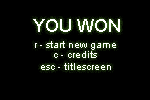
<style>
.page{position:relative;width:150px;height:100px;background:#000000}
.page>*{position:absolute;margin:0}
.t1{font:18px "ArialMT";color:#ffffff}
.t2{font:10px "ArialMT";color:#ffffff}
</style>
<div class="page">
<p class="t1" style="left:33px;top:19px;width:87px;height:13px">YOU WON</p>
<p class="t2" style="left:35px;top:41px;width:81px;height:9px">r - start new game</p>
<p class="t2" style="left:54px;top:51px;width:43px;height:7px">c - credits</p>
<p class="t2" style="left:41px;top:63px;width:70px;height:7px">esc - titlescreen</p>
</div>
